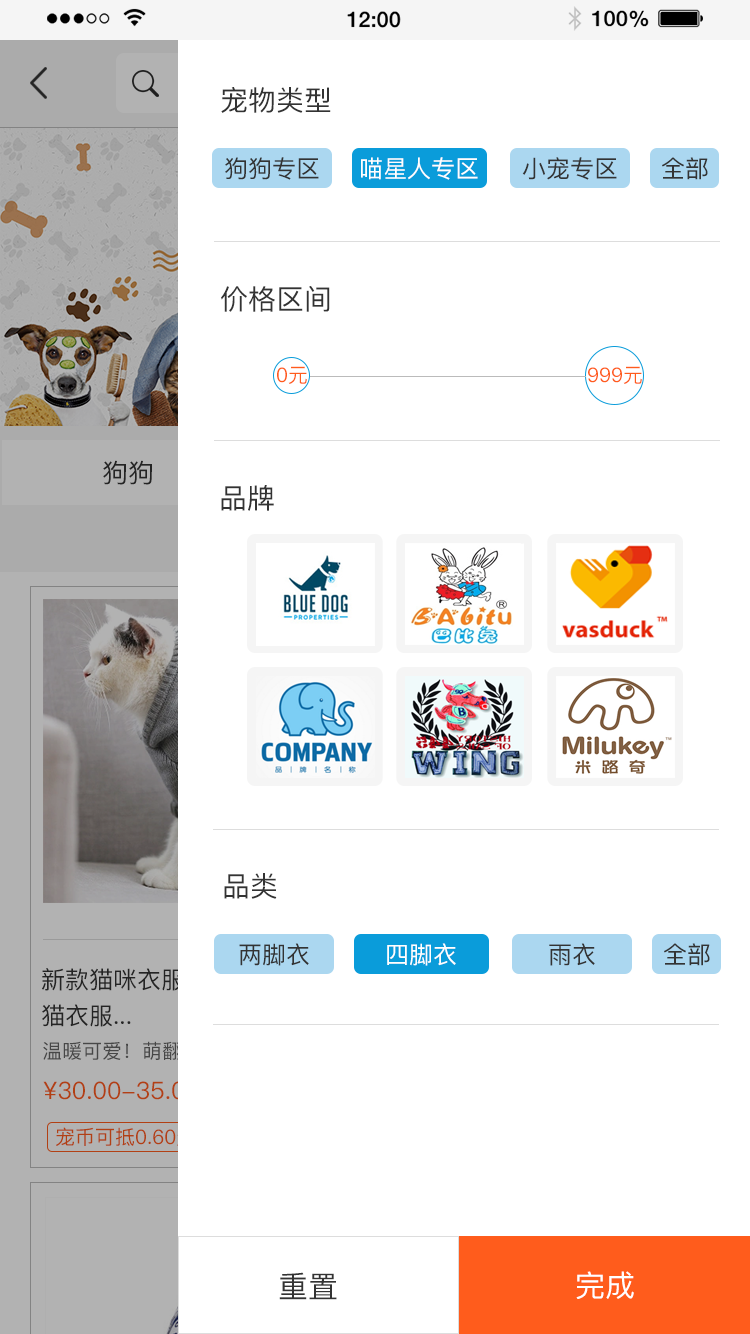
<style>
.page{position:relative;width:750px;height:1334px;background:#ffffff}
.page>*{position:absolute;margin:0}
.t1{font:28px "PingFangSC";color:#333333}
.t2{font:24px "PingFangSC";color:#333333}
.t3{font:24px "PingFangSC";color:#ffffff}
.t4{font:20px "PingFangSC";color:#ff5c1c}
.t5{font:30px "PingFangSC";color:#333333}
.t6{font:30px "PingFangSC";color:#ffffff}
</style>
<div class="page">
<p class="t1" style="left:221px;top:87px;width:110px;height:26px">宠物类型</p>
<p class="t2" style="left:225px;top:157px;width:94px;height:23px">狗狗专区</p>
<p class="t3" style="left:361px;top:157px;width:117px;height:23px">喵星人专区</p>
<p class="t2" style="left:522px;top:157px;width:95px;height:23px">小宠专区</p>
<p class="t2" style="left:662px;top:157px;width:46px;height:23px">全部</p>
<p class="t1" style="left:221px;top:286px;width:109px;height:26px">价格区间</p>
<p class="t4" style="left:277px;top:366px;width:30px;height:18px">0元</p>
<p class="t4" style="left:588px;top:366px;width:54px;height:18px">999元</p>
<p class="t1" style="left:221px;top:485px;width:53px;height:26px">品牌</p>
<p class="t1" style="left:224px;top:873px;width:53px;height:26px">品类</p>
<p class="t2" style="left:239px;top:943px;width:70px;height:23px">两脚衣</p>
<p class="t3" style="left:387px;top:943px;width:69px;height:23px">四脚衣</p>
<p class="t2" style="left:549px;top:943px;width:46px;height:23px">雨衣</p>
<p class="t2" style="left:664px;top:943px;width:46px;height:23px">全部</p>
<p class="t5" style="left:279px;top:1272px;width:58px;height:28px">重置</p>
<p class="t6" style="left:576px;top:1271px;width:58px;height:28px">完成</p>
</div>
